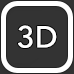
<style>
.page{position:relative;width:74px;height:74px;background:#333333}
.page>*{position:absolute;margin:0}
.t1{font:30px "AvenirNext-Medium";color:#ffffff}
</style>
<div class="page">
<p class="t1" style="left:18px;top:25px;width:39px;height:23px">3D</p>
</div>
